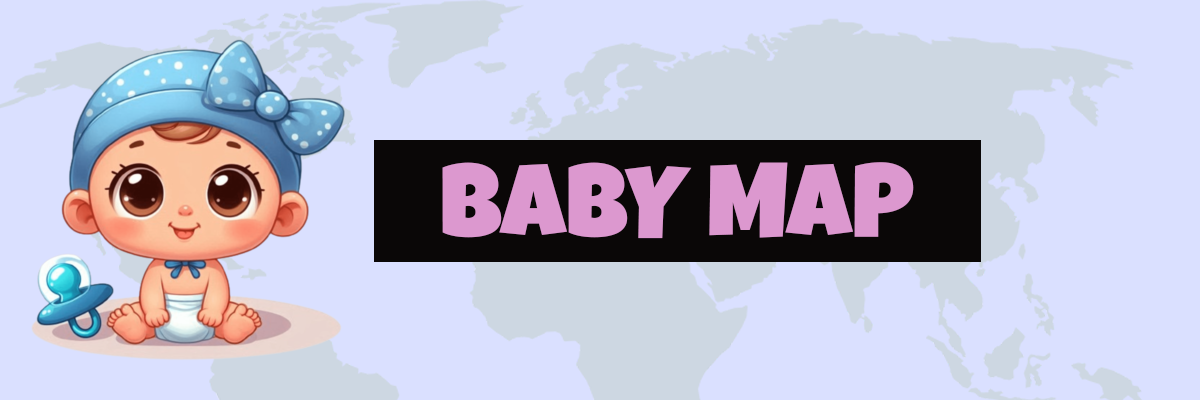
<style>
.page{position:relative;width:1200px;height:400px;background:#dae0ff}
.page>*{position:absolute;margin:0}
.t1{font:103px "LuckiestGuy-Regular";color:#dc98cf}
</style>
<div class="page">
<p class="t1" style="left:442px;top:162px;width:472px;height:77px">BABY MAP</p>
</div>
